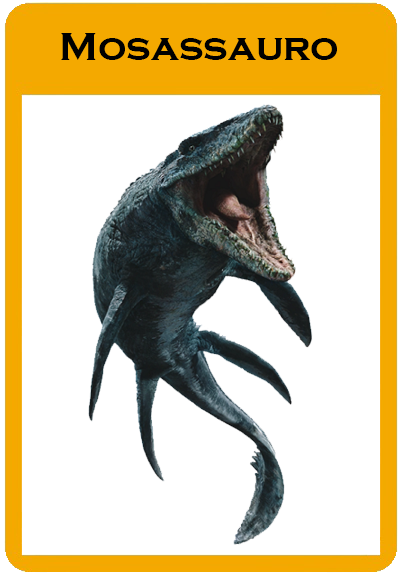
<style>
.page{position:relative;width:400px;height:575px;background:#ffffff}
.page>*{position:absolute;margin:0}
.t1{font:40px "CopperplateGothic-Bold";color:#000000}
</style>
<div class="page">
<p class="t1" style="left:61px;top:33px;width:276px;height:27px">Mosassauro</p>
</div>
